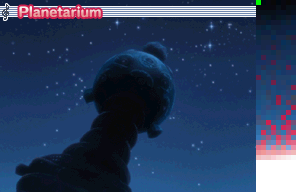
<style>
.page{position:relative;width:296px;height:192px}
.page>*{position:absolute;margin:0}
.t1{font:12px "HummingStd-E";letter-spacing:0.02em}
</style>
<div class="page">
<p class="t1" style="left:19px;top:6px;width:82px;height:12px">Planetarium</p>
</div>
